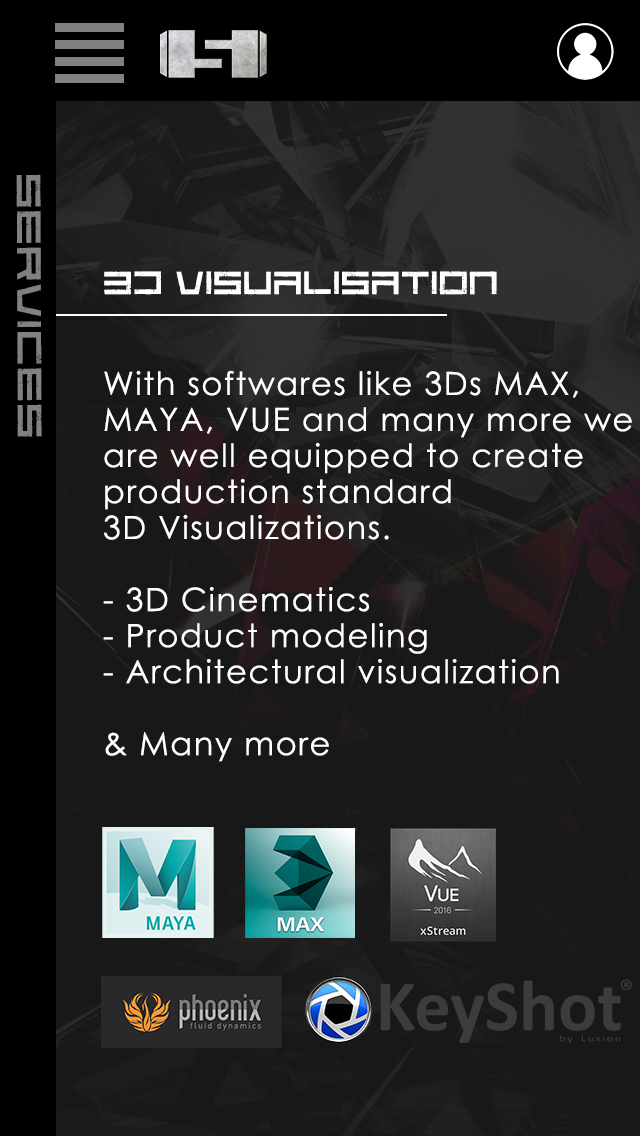
<style>
.page{position:relative;width:640px;height:1136px;background:#181818}
.page>*{position:absolute;margin:0}
.t1{font:42px "CodePredators-Regular";letter-spacing:0.075em;color:#818181;scale:1.13 1}
.t2{font:40px "CodePredators-Regular";letter-spacing:0.05em;color:#ffffff}
.t3{font:32px/36px "CenturyGothic";letter-spacing:0.05em;color:#ffffff}
</style>
<div class="page">
<p class="t1" style="left:16px;top:174px;width:26px;height:263px;rotate:90deg">services</p>
<p class="t2" style="left:104px;top:271px;width:393px;height:24px">3D Visualisation</p>
<p class="t3" style="left:103px;top:370px;width:529px;height:392px;text-align:right">With softwares like 3Ds MAX, <br>MAYA, VUE and many more we<br>are well equipped to create <br>production standard <br>3D Visualizations.<br><br>- 3D Cinematics<br>- Product modeling<br>- Architectural visualization  <br><br>&amp; Many more</p>
</div>
